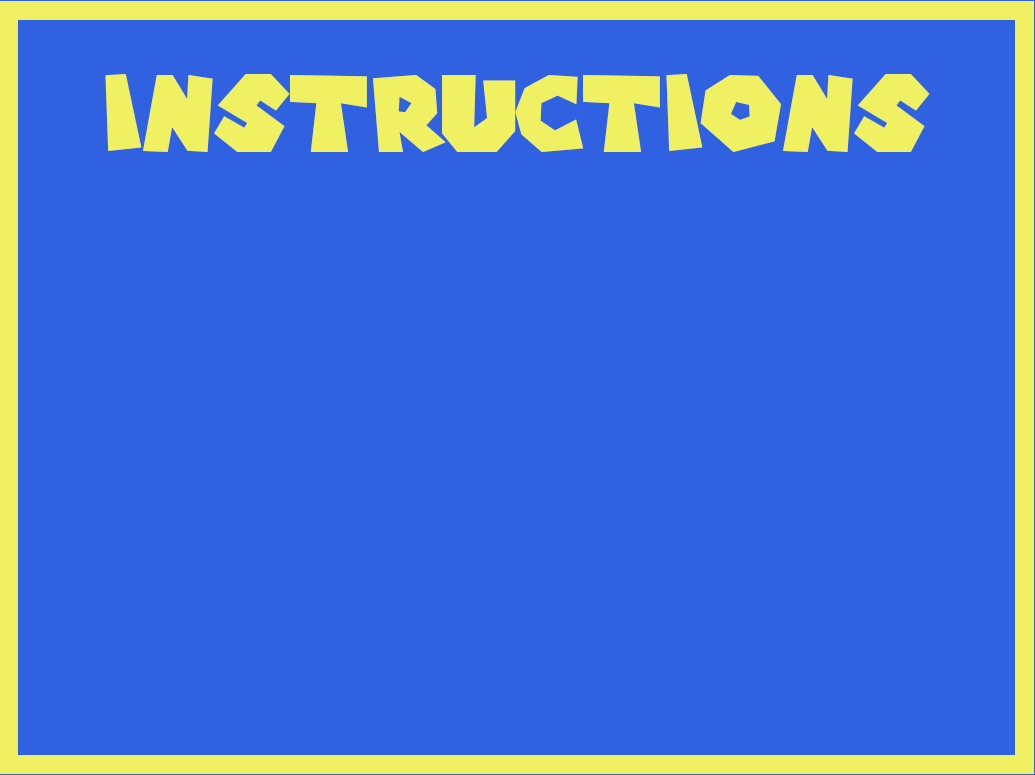
<style>
.page{position:relative;width:1035px;height:775px;background:#2f61e1}
.page>*{position:absolute;margin:0}
.t1{font:104.2px "SuperMarioGalaxy";color:#eff163}
</style>
<div class="page">
<p class="t1" style="left:105px;top:74px;width:825px;height:78px">Instructions</p>
</div>
